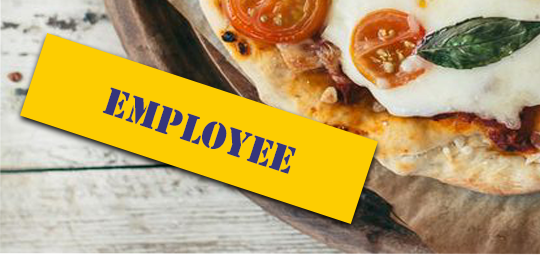
<style>
.page{position:relative;width:540px;height:255px}
.page>*{position:absolute;margin:0}
.t1{font:40px "Stencil";color:#35357c}
</style>
<div class="page">
<p class="t1" style="left:102px;top:87px;width:194px;height:87px;rotate:18deg">EMPLOYEE</p>
</div>
